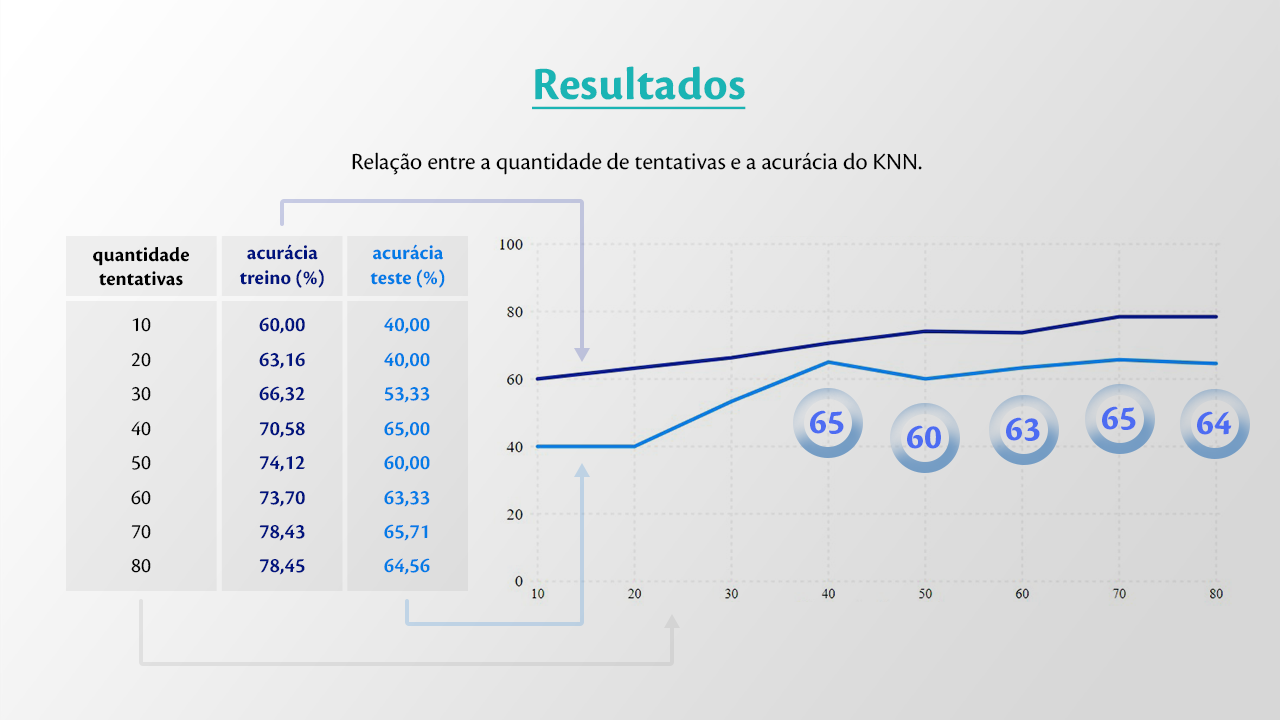
<style>
.page{position:relative;width:1280px;height:720px}
.page>*{position:absolute;margin:0}
.t1{font:48px "CronosPro-Bold";color:#1ab4b4;text-decoration:underline}
.t2{font:24px "CronosPro-Regular";color:#000000}
.t3{font:20.7px "CronosPro-Bold";color:#00137e}
.t4{font:20.7px "CronosPro-Bold";color:#047be6}
.t5{font:20.7px "CronosPro-Bold";color:#000000}
.t6{font:21.5px/34.5px "CronosPro-Regular";color:#000000}
.t7{font:21.5px/34.5px "CronosPro-Semibold";color:#00137e}
.t8{font:21.5px/34.5px "CronosPro-Semibold";color:#047be6}
.t9{font:36px "CronosPro-Bold";color:#4d6cf2}
</style>
<div class="page">
<p class="t1" style="left:532px;top:66px;width:214px;height:44px">Resultados</p>
<p class="t2" style="left:352px;top:152px;width:570px;height:23px">Relação entre a quantidade de tentativas e a acurácia do KNN.</p>
<p class="t3" style="left:239px;top:244px;width:85px;height:44px;text-align:center">acurácia<br>treino (%)</p>
<p class="t4" style="left:370px;top:244px;width:75px;height:44px;text-align:center">acurácia<br>teste (%)</p>
<p class="t5" style="left:93px;top:247px;width:96px;height:39px;text-align:center">quantidade<br>tentativas</p>
<p class="t6" style="left:131px;top:317px;width:20px;height:256px;text-align:center">10<br>20<br>30<br>40<br>50<br>60<br>70<br>80</p>
<p class="t7" style="left:259px;top:317px;width:46px;height:258px;text-align:center">60,00<br>63,16<br>66,32<br>70,58<br>74,12<br>73,70<br>78,43<br>78,45</p>
<p class="t8" style="left:384px;top:317px;width:46px;height:258px;text-align:center">40,00<br>40,00<br>53,33<br>65,00<br>60,00<br>63,33<br>65,71<br>64,56</p>
<p class="t9" style="left:810px;top:410px;width:34px;height:24px">65</p>
<p class="t9" style="left:1102px;top:406px;width:34px;height:24px">65</p>
<p class="t9" style="left:1197px;top:411px;width:35px;height:24px">64</p>
<p class="t9" style="left:907px;top:425px;width:34px;height:24px">60</p>
<p class="t9" style="left:1006px;top:417px;width:34px;height:24px">63</p>
</div>
